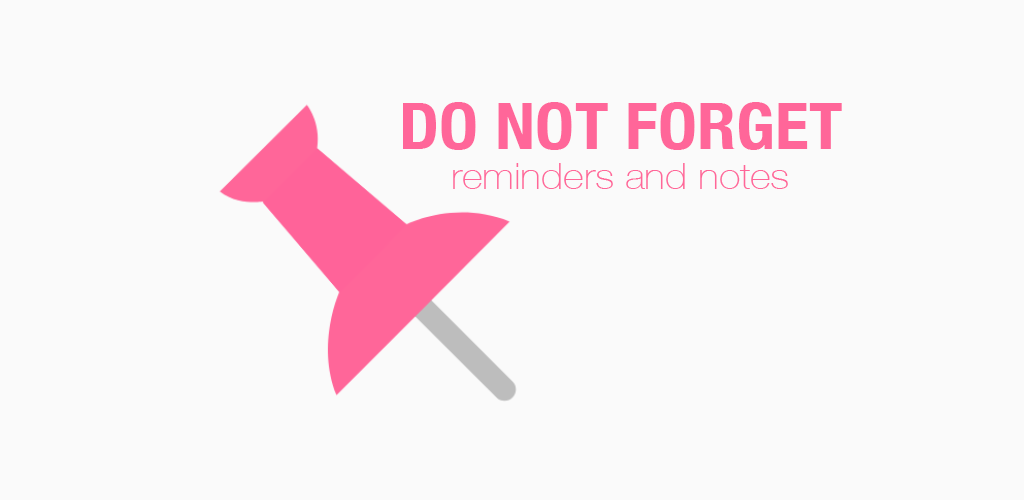
<style>
.page{position:relative;width:1024px;height:500px;background:#fafafa}
.page>*{position:absolute;margin:0}
.t1{font:64px "HelveticaNeue-CondensedBold";color:#ff6699;text-transform:uppercase;scale:1.1 1}
.t2{font:36px "HelveticaNeue-Thin";color:#ff6699;scale:1.1 1}
</style>
<div class="page">
<p class="t1" style="left:403px;top:102px;width:439px;height:48px">do not forget</p>
<p class="t2" style="left:453px;top:163px;width:335px;height:26px">reminders and notes</p>
</div>
